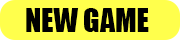
<style>
.page{position:relative;width:180px;height:40px;background:#ffff4c}
.page>*{position:absolute;margin:0}
.t1{font:30px "Impact";color:#000000}
</style>
<div class="page">
<p class="t1" style="left:26px;top:8px;width:123px;height:24px">NEW GAME</p>
</div>
